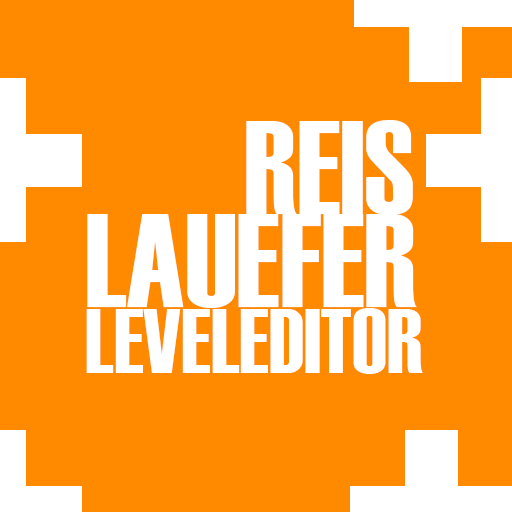
<style>
.page{position:relative;width:512px;height:512px;background:#ff8a00}
.page>*{position:absolute;margin:0}
.t1{font:132.5px "Haettenschweiler";color:#ffffff}
.t2{font:91.1px "Haettenschweiler";color:#ffffff}
</style>
<div class="page">
<p class="t1" style="left:246px;top:120px;width:167px;height:95px">REIS</p>
<p class="t1" style="left:87px;top:214px;width:330px;height:94px">LAUEFER</p>
<p class="t2" style="left:86px;top:308px;width:337px;height:66px">LEVELEDITOR</p>
</div>
